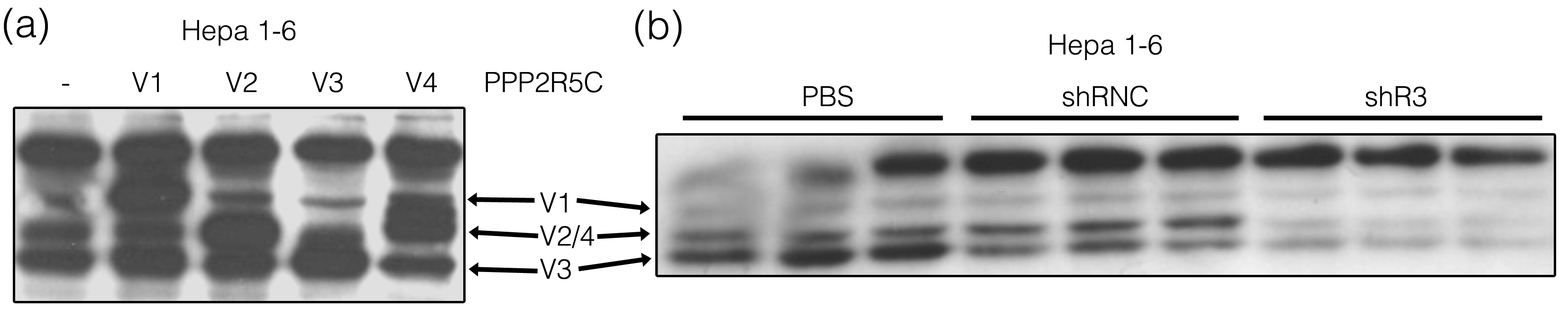
<style>
.page{position:relative;width:1568px;height:336px;background:#ffffff}
.page>*{position:absolute;margin:0}
.t1{font:39.5px "Helvetica-Light";color:#000000}
.t2{font:27.7px "Helvetica-Light";color:#000000}
</style>
<div class="page">
<p class="t1" style="left:4px;top:8px;width:44px;height:37px">(a)</p>
<p class="t1" style="left:635px;top:9px;width:47px;height:38px">(b)</p>
<p class="t2" style="left:183px;top:20px;width:112px;height:26px">Hepa 1-6</p>
<p class="t2" style="left:1050px;top:34px;width:112px;height:26px">Hepa 1-6</p>
<p class="t2" style="left:62px;top:71px;width:541px;height:22px">-        V1        V2       V3        V4      PPP2R5C</p>
<p class="t2" style="left:804px;top:85px;width:623px;height:22px">PBS                           shRNC                            shR3</p>
<p class="t2" style="left:540px;top:193px;width:54px;height:86px">V1<br>V2/4<br>V3</p>
</div>
